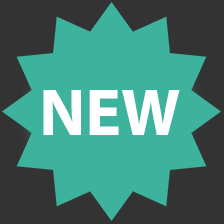
<style>
.page{position:relative;width:224px;height:224px;background:#3db39e}
.page>*{position:absolute;margin:0}
.t1{font:67px "MyriadPro-Bold";color:#ffffff}
</style>
<div class="page">
<p class="t1" style="left:43px;top:90px;width:137px;height:45px">NEW</p>
</div>
